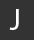
<style>
.page{position:relative;width:34px;height:40px;background:#333333}
.page>*{position:absolute;margin:0}
.t1{font:30px "MyriadPro-Regular";color:#ffffff}
</style>
<div class="page">
<p class="t1" style="left:9px;top:9px;width:10px;height:21px">J</p>
</div>
